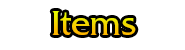
<style>
.page{position:relative;width:185px;height:50px;background:#ffffff}
.page>*{position:absolute;margin:0}
.t1{font:36px "FrizQuadrataStd"}
</style>
<div class="page">
<p class="t1" style="left:52px;top:11px;width:84px;height:24px">Items</p>
</div>
